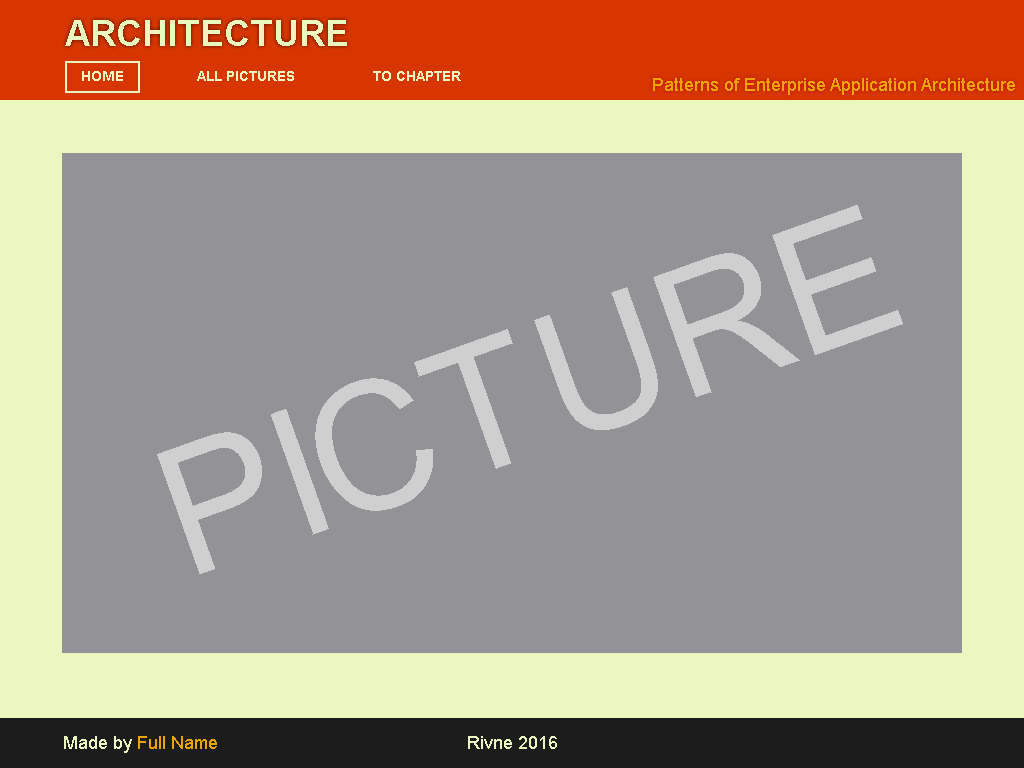
<style>
.page{position:relative;width:1024px;height:768px;background:#939397}
.page>*{position:absolute;margin:0}
.t1{font:36px "Arial-BoldMT";color:#eaf8bf;text-transform:uppercase}
.t2{font:14px "Arial-BoldMT";color:#eaf8bf;text-transform:uppercase}
.t3{font:18px "ArialMT";color:#eca400}
.t4{font:178.5px "ArialMT";color:#cfcfcf}
.t5{font:18px "ArialMT";color:#eaf8bf}
</style>
<div class="page">
<p class="t1" style="left:65px;top:20px;width:282px;height:26px">Architecture</p>
<p class="t2" style="left:82px;top:71px;width:41px;height:10px">Home</p>
<p class="t2" style="left:197px;top:71px;width:97px;height:10px">All pictures</p>
<p class="t2" style="left:373px;top:71px;width:88px;height:10px">to chapter</p>
<p class="t3" style="left:653px;top:78px;width:362px;height:17px">Patterns of Enterprise Application Architecture</p>
<p class="t4" style="left:157px;top:205px;width:746px;height:369px;rotate:-20deg">PICTURE</p>
<p class="t3" style="left:64px;top:736px;width:153px;height:17px"><span class="t5">Made by </span>Full Name</p>
<p class="t5" style="left:468px;top:736px;width:89px;height:13px">Rivne 2016</p>
</div>
